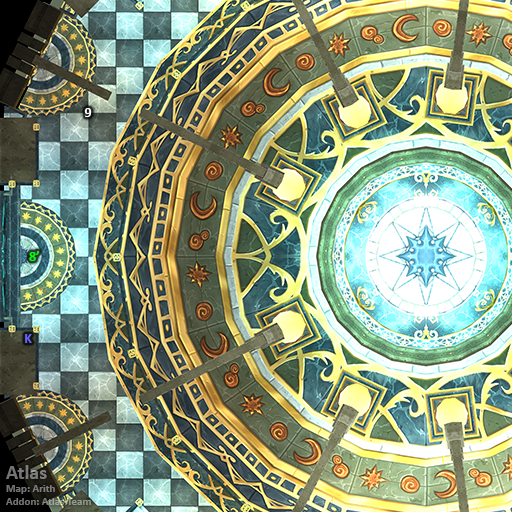
<style>
.page{position:relative;width:512px;height:512px}
.page>*{position:absolute;margin:0}
.t1{font:14px "Calibri-Bold";color:#ffffff}
.t2{font:14px "Calibri-Bold";color:#00ff00}
.t3{font:14px "Calibri-Bold";color:#6666ff}
.t4{font:11px "Calibri-Bold";color:#7b7b79}
.t5{font:20px "Calibri-Bold";color:#7b7b79}
</style>
<div class="page">
<p class="t1" style="left:84px;top:108px;width:8px;height:9px">9</p>
<p class="t2" style="left:29px;top:251px;width:10px;height:10px">8’</p>
<p class="t3" style="left:25px;top:334px;width:7px;height:9px">K</p>
<p class="t4" style="left:6px;top:465px;width:85px;height:40px"><span class="t5">Atlas<br></span>Map: Arith<br>Addon: Atlas Team</p>
</div>
